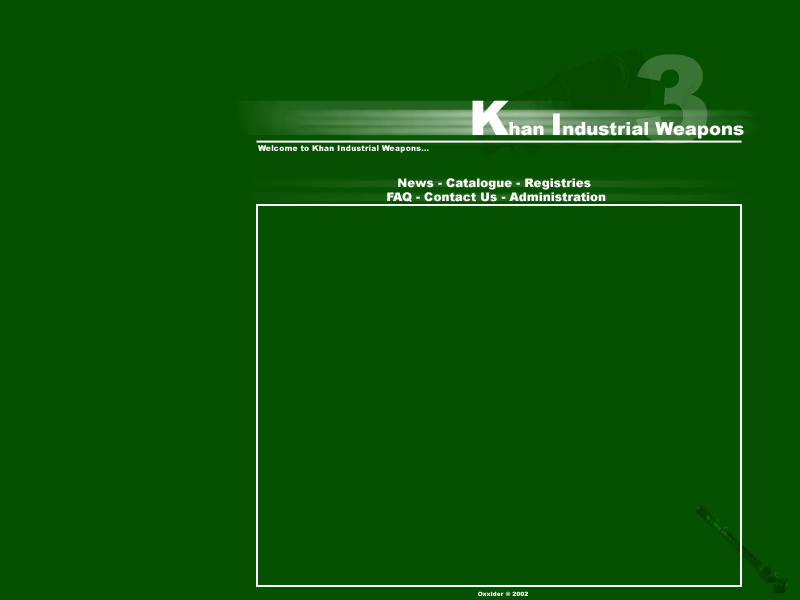
<style>
.page{position:relative;width:800px;height:600px;background:#065100}
.page>*{position:absolute;margin:0}
.t1{font:120px "Arial-Black"}
.t2{font:18px "Arial-Black";color:#ffffff}
.t3{font:48px "Arial-Black";color:#ffffff}
.t4{font:30px "Arial-Black";color:#ffffff}
.t5{font:8px "Arial-Black";color:#ffffff}
.t6{font:12px "Arial-Black";color:#ffffff}
.t7{font:6px "Arial-Black";color:#ffffff}
</style>
<div class="page">
<p class="t1" style="left:636px;top:54px;width:72px;height:90px">3</p>
<p class="t2" style="left:472px;top:100px;width:272px;height:39px"><span class="t3">K</span>han <span class="t4">I</span>ndustrial Weapons</p>
<p class="t5" style="left:258px;top:145px;width:171px;height:8px">Welcome to Khan Industrial Weapons...</p>
<p class="t6" style="left:387px;top:178px;width:219px;height:24px;text-align:center">News - Catalogue - Registries <br> FAQ - Contact Us - Administration</p>
<p class="t7" style="left:478px;top:591px;width:50px;height:5px">Oxxider © 2002</p>
</div>
